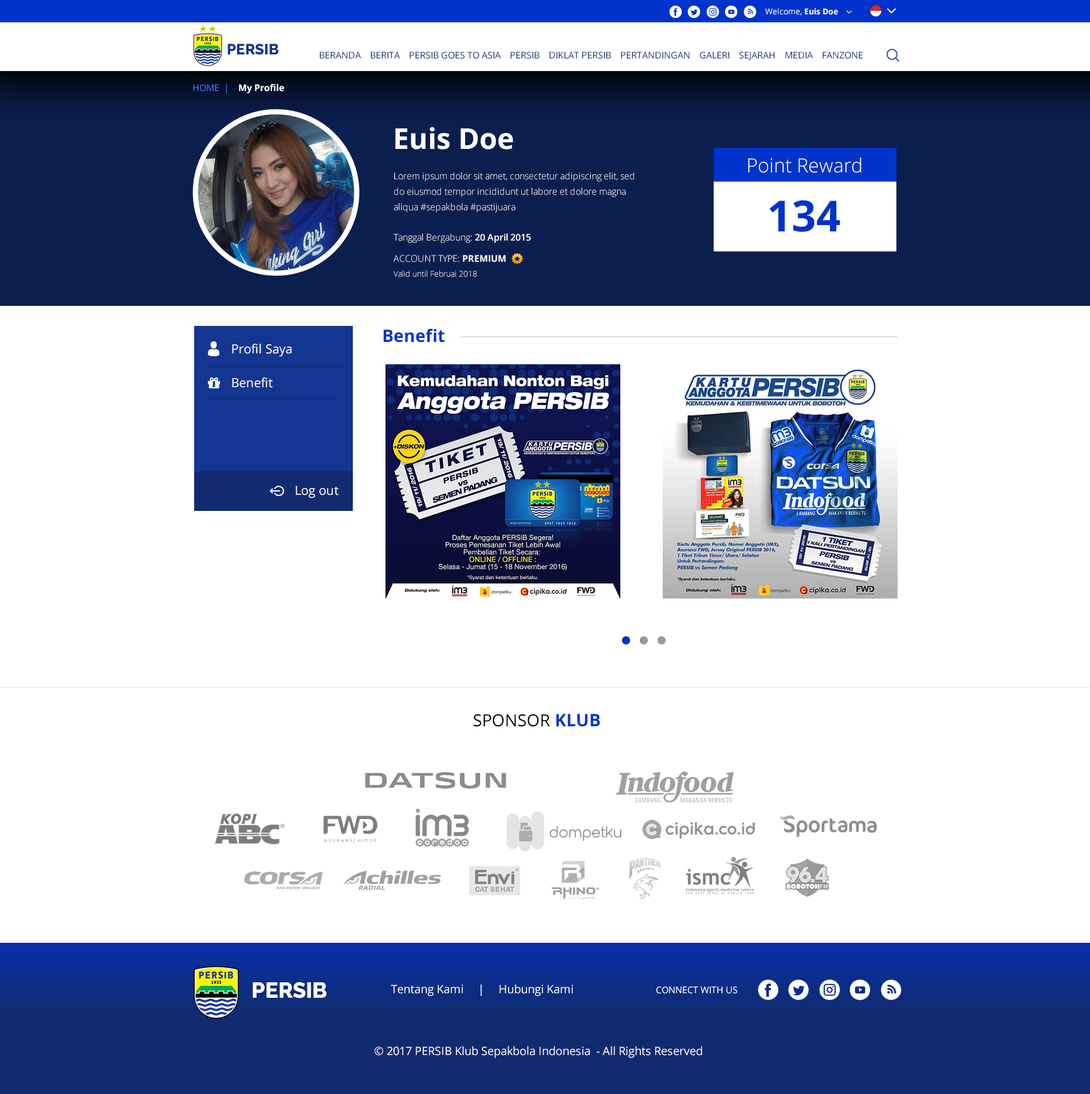
<style>
.page{position:relative;width:1090px;height:1094px;background:#ffffff}
.page>*{position:absolute;margin:0}
.t1{font:8px "OpenSans";color:#ffffff}
.t2{font:8px "OpenSans-Bold";color:#ffffff}
.t3{font:14.9px "Raleway-ExtraBold";color:#143692}
.t4{font:9.2px "OpenSans";color:#102c71}
.t5{font:9.2px "OpenSans-Bold";color:#ffffff}
.t6{font:9.2px "OpenSans";color:#3f70ff}
.t7{font:28.6px "OpenSans-Bold";color:#ffffff}
.t8{font:19.5px "OpenSans-Light";color:#ffffff}
.t9{font:9.2px/15.3px "OpenSans-Light";color:#ffffff}
.t10{font:43px "OpenSans-Bold";color:#0033cc}
.t11{font:9.2px "OpenSans-Light";color:#ffffff}
.t12{font:9.2px "OpenSans-Semibold";color:#ffffff}
.t13{font:8px "OpenSans-Light";color:#ffffff}
.t14{font:17.2px "OpenSans-Bold";color:#0033cc}
.t15{font:12.6px "OpenSans";color:#ffffff}
.t16{font:16.6px "OpenSans";color:#000000}
.t17{font:21.8px "Raleway-ExtraBold";color:#ffffff}
.t18{font:11.5px "OpenSans";color:#ffffff}
.t19{font:9.2px "OpenSans";color:#ffffff}
</style>
<div class="page">
<p class="t1" style="left:765px;top:8px;width:73px;height:7px">Welcome, <span class="t2">Euis Doe</span></p>
<p class="t3" style="left:227px;top:44px;width:51px;height:11px">PERSIB</p>
<p class="t4" style="left:320px;top:52px;width:543px;height:8px">BERANDA    BERITA    PERSIB GOES TO ASIA    PERSIB    DIKLAT PERSIB    PERTANDINGAN    GALERI    SEJARAH    MEDIA    FANZONE</p>
<p class="t5" style="left:193px;top:84px;width:91px;height:9px"><span class="t6">HOME  |   </span> My Profile</p>
<p class="t7" style="left:395px;top:127px;width:118px;height:22px">Euis Doe</p>
<p class="t8" style="left:748px;top:158px;width:113px;height:15px">Point Reward</p>
<p class="t9" style="left:393px;top:172px;width:241px;height:40px">Lorem ipsum dolor sit amet, consectetur adipiscing elit, sed do eiusmod tempor incididunt ut labore et dolore magna aliqua #sepakbola #pastijuara</p>
<p class="t10" style="left:769px;top:200px;width:71px;height:32px">134</p>
<p class="t11" style="left:393px;top:233px;width:138px;height:10px">Tanggal Bergabung:<span class="t12"> 20 April 2015</span></p>
<p class="t11" style="left:393px;top:255px;width:113px;height:7px">ACCOUNT TYPE: <span class="t5">PREMIUM</span></p>
<p class="t13" style="left:393px;top:270px;width:84px;height:7px">Valid until Februai 2018</p>
<p class="t14" style="left:383px;top:329px;width:61px;height:14px">Benefit</p>
<p class="t15" style="left:232px;top:344px;width:60px;height:13px">Profil Saya</p>
<p class="t15" style="left:232px;top:377px;width:41px;height:11px">Benefit</p>
<p class="t15" style="left:296px;top:486px;width:43px;height:12px">Log out</p>
<p class="t16" style="left:474px;top:714px;width:126px;height:13px">SPONSOR <span class="t14">KLUB</span></p>
<p class="t17" style="left:253px;top:982px;width:73px;height:16px">PERSIB</p>
<p class="t18" style="left:391px;top:984px;width:182px;height:12px">Tentang Kami     |     Hubungi Kami</p>
<p class="t19" style="left:656px;top:986px;width:81px;height:8px">CONNECT WITH US</p>
<p class="t18" style="left:375px;top:1046px;width:327px;height:12px">© 2017 PERSIB Klub Sepakbola Indonesia  - All Rights Reserved</p>
</div>
